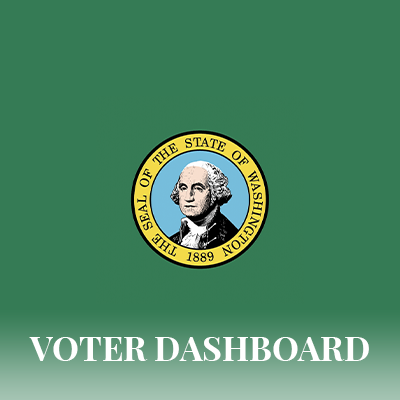
<style>
.page{position:relative;width:400px;height:400px;background:#357b55}
.page>*{position:absolute;margin:0}
.t1{font:34px "PlayfairDisplay-Bold";color:#ffffff;text-transform:uppercase}
</style>
<div class="page">
<p class="t1" style="left:29px;top:337px;width:340px;height:24px">Voter Dashboard</p>
</div>
